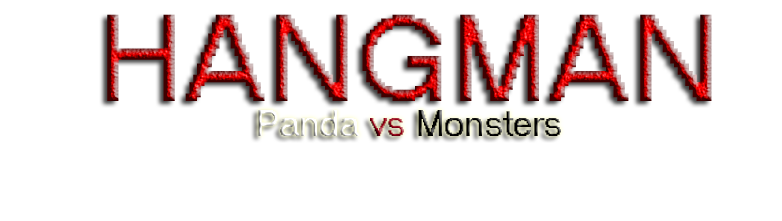
<style>
.page{position:relative;width:782px;height:221px;background:#ffffff}
.page>*{position:absolute;margin:0}
.t1{font:120px "MS Sans Serif"}
.t2{font:36px "MS Sans Serif"}
</style>
<div class="page">
<p class="t1" style="left:107px;top:14px;width:605px;height:87px">HANGMAN</p>
<p class="t2" style="left:258px;top:110px;width:303px;height:26px">Panda vs Monsters</p>
</div>
